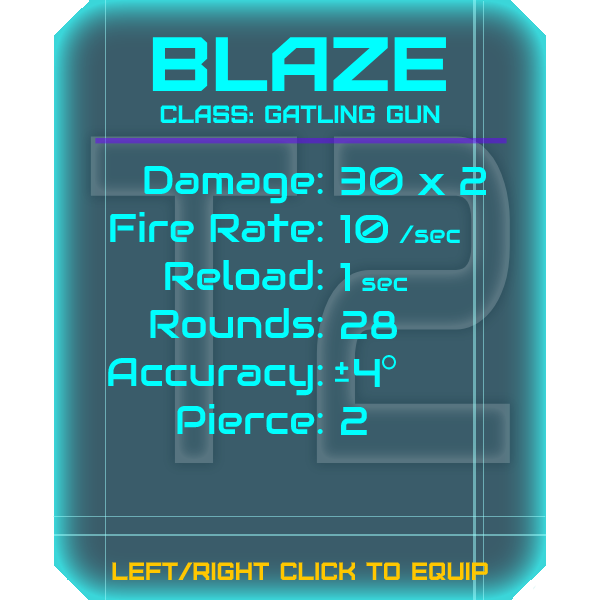
<style>
.page{position:relative;width:600px;height:600px;background:#3a5c6a}
.page>*{position:absolute;margin:0}
.t1{font:76.8px "Furore";color:#00ffff;scale:1.13 1}
.t2{font:25px "Furore";color:#00ffff}
.t3{font:40px "Audiowide-Regular";color:#00ffff}
.t4{font:25px "Audiowide-Regular";color:#00ffff}
.t5{font:25px "Furore";color:#ffc700}
</style>
<div class="page">
<p class="t1" style="left:152px;top:37px;width:294px;height:54px">blaze</p>
<p class="t2" style="left:160px;top:105px;width:280px;height:18px">Class: gatling gun</p>
<p class="t3" style="left:108px;top:165px;width:215px;height:269px;text-align:right">Damage:<br>Fire Rate:<br>Reload:<br>Rounds:<br>Accuracy:<br>Pierce:</p>
<p class="t3" style="left:340px;top:166px;width:147px;height:269px">30 x 2<br>10 <span class="t4">/sec<br></span>1 <span class="t4">sec<br></span>28<br> 4<br>2</p>
<p class="t5" style="left:112px;top:562px;width:376px;height:18px">left/right click to equip</p>
</div>
